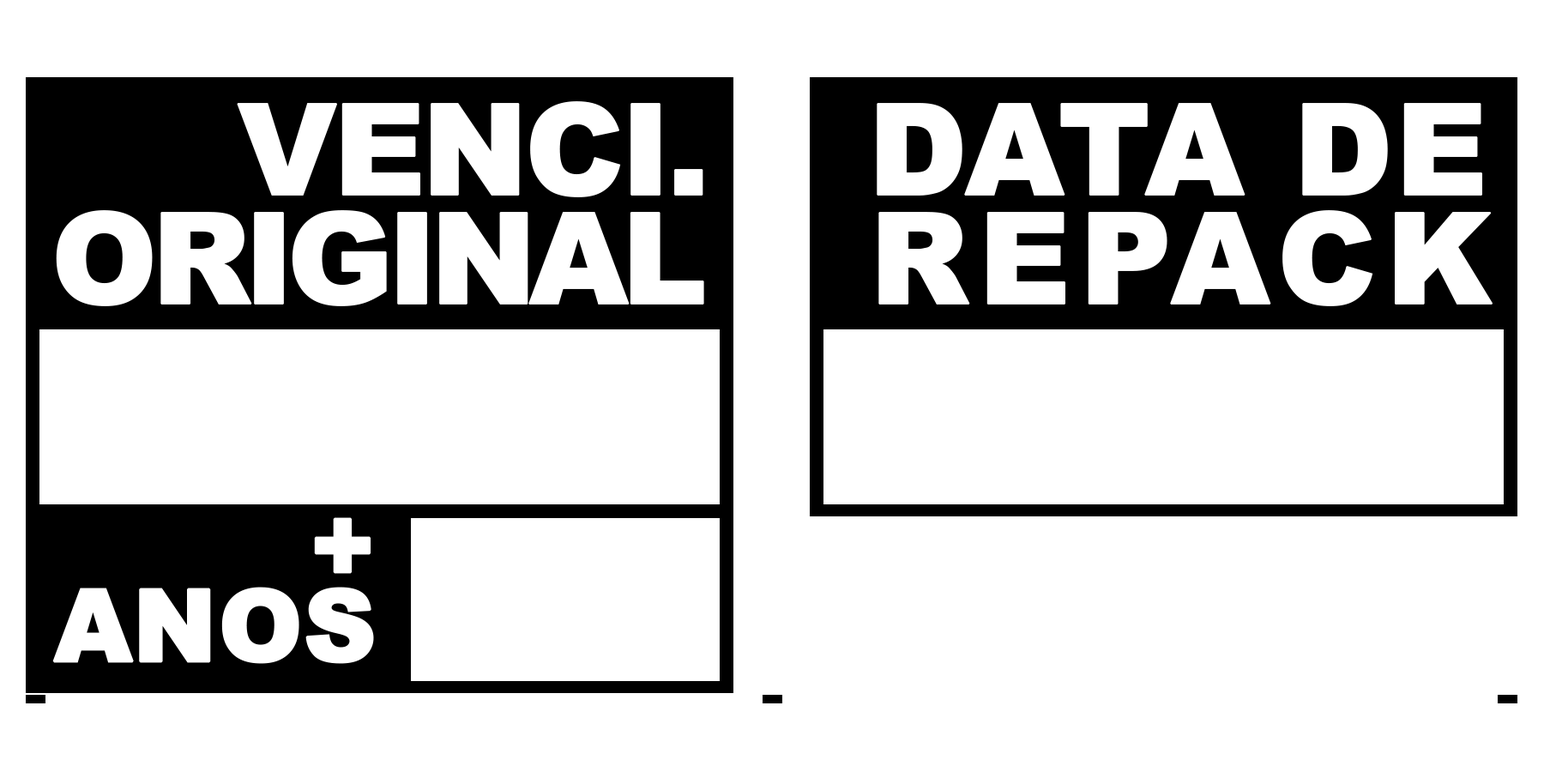
<style>
.page{position:relative;width:1544px;height:772px;background:#ffffff}
.page>*{position:absolute;margin:0}
.t1{font:127.1px/109px "Arial-Black";letter-spacing:-0.075em;color:#ffffff;font-weight:bold}
.t2{font:127.1px/109px "Arial-Black";letter-spacing:-0.05em;color:#ffffff;font-weight:bold}
.t3{font:127.1px/109px "Arial-Black";color:#ffffff;font-weight:bold}
.t4{font:127.1px/109px "Arial-Black";letter-spacing:0.05em;color:#ffffff;font-weight:bold}
.t5{font:100.2px/80.2px "Arial-Black";letter-spacing:-0.01em;color:#ffffff;font-weight:bold}
</style>
<div class="page">
<p class="t1" style="left:56px;top:101px;width:648px;height:205px;text-align:right"><span class="t2">VENCI.<br></span>ORIGINAL</p>
<p class="t3" style="left:877px;top:103px;width:617px;height:203px;text-align:center">DATA DE<br><span class="t4">REPACK</span></p>
<p class="t5" style="left:52px;top:517px;width:322px;height:147px;text-align:right">+<br>ANOS</p>
</div>
